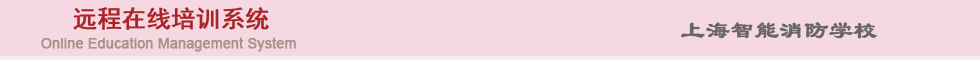
<style>
.page{position:relative;width:980px;height:60px;background:#f6d8e2}
.page>*{position:absolute;margin:0}
.t1{font:24px "SimHei";color:#a82426;font-weight:bold}
.t2{font:24px "LiSu";color:#686665;font-weight:bold}
.t3{font:14px "ArialMT";color:#a8938c;font-weight:bold}
</style>
<div class="page">
<p class="t1" style="left:73px;top:7px;width:196px;height:23px">远程在线培训系统</p>
<p class="t2" style="left:681px;top:22px;width:197px;height:17px">上海智能消防学校</p>
<p class="t3" style="left:41px;top:37px;width:255px;height:15px">Online Education Management System</p>
</div>
